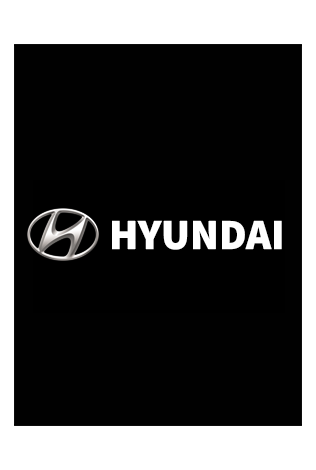
<style>
.page{position:relative;width:316px;height:470px;background:#010101}
.page>*{position:absolute;margin:0}
.t1{font:43px "SourceSansRoman-Black";color:#ffffff}
</style>
<div class="page">
<p class="t1" style="left:112px;top:220px;width:170px;height:30px">HYUNDAI</p>
</div>
